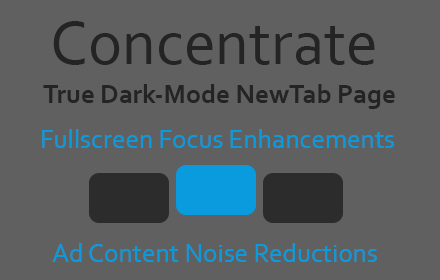
<style>
.page{position:relative;width:440px;height:280px;background:#606060}
.page>*{position:absolute;margin:0}
.t1{font:64px "Corbel";color:#242424}
.t2{font:27px "Corbel-Bold";color:#242424}
.t3{font:27px "Corbel";color:#099bdd}
</style>
<div class="page">
<p class="t1" style="left:53px;top:21px;width:322px;height:44px">Concentrate</p>
<p class="t2" style="left:43px;top:84px;width:352px;height:25px">True Dark-Mode NewTab Page</p>
<p class="t3" style="left:42px;top:129px;width:352px;height:19px">Fullscreen Focus Enhancements</p>
<p class="t3" style="left:52px;top:243px;width:325px;height:19px">Ad Content Noise Reductions</p>
</div>
